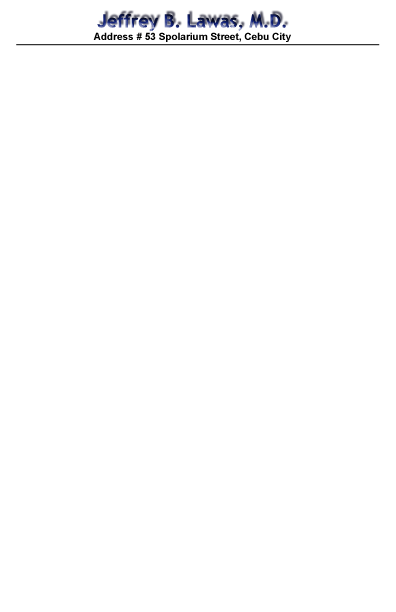
<style>
.page{position:relative;width:396px;height:612px;background:#ffffff}
.page>*{position:absolute;margin:0}
.t1{font:18px "TrebuchetMS-Bold"}
.t2{font:10px "Arial-BoldMT";color:#000000}
</style>
<div class="page">
<p class="t1" style="left:97px;top:14px;width:189px;height:18px">Jeffrey B. Lawas, M.D.</p>
<p class="t2" style="left:93px;top:32px;width:198px;height:10px">Address # 53 Spolarium Street, Cebu City</p>
</div>
